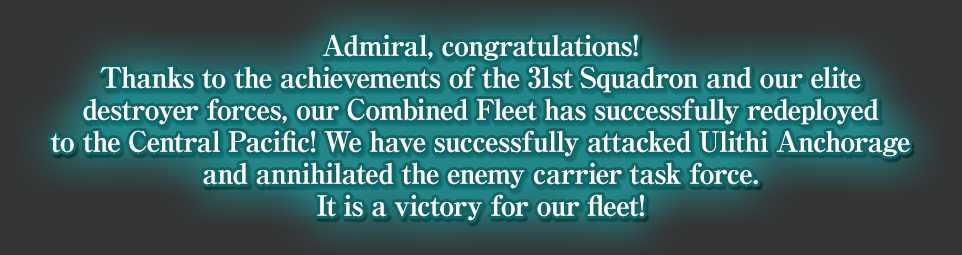
<style>
.page{position:relative;width:962px;height:255px}
.page>*{position:absolute;margin:0}
.t1{font:28px/32px "RyuminPro-ExBold";letter-spacing:-0.04em;color:#ffffff}
</style>
<div class="page">
<p class="t1" style="left:50px;top:34px;width:860px;height:187px;text-align:center">Admiral, congratulations!<br>Thanks to the achievements of the 31st Squadron and our elite<br>destroyer forces, our Combined Fleet has successfully redeployed<br>to the Central Pacific! We have successfully attacked Ulithi Anchorage<br>and annihilated the enemy carrier task force.<br>It is a victory for our fleet!</p>
</div>
